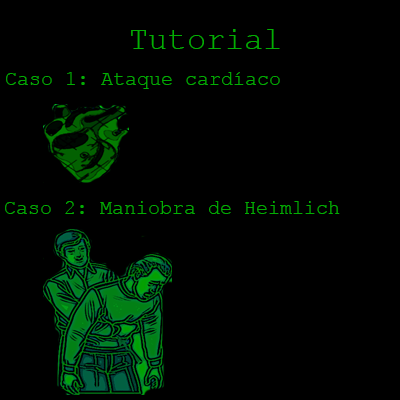
<style>
.page{position:relative;width:400px;height:400px;background:#000000}
.page>*{position:absolute;margin:0}
.t1{font:32px "CourierNewPSMT";color:#03ad03}
.t2{font:20px "CourierNewPSMT";color:#03ad03}
</style>
<div class="page">
<p class="t1" style="left:131px;top:29px;width:149px;height:20px">Tutorial</p>
<p class="t2" style="left:6px;top:72px;width:274px;height:17px">Caso 1: Ataque cardíaco</p>
<p class="t2" style="left:5px;top:201px;width:335px;height:13px">Caso 2: Maniobra de Heimlich</p>
</div>
